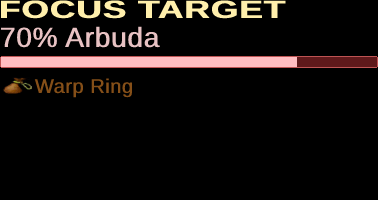
<style>
.page{position:relative;width:378px;height:200px;background:#000000}
.page>*{position:absolute;margin:0}
.t1{font:25.2px "Arimo-Bold";color:#ffefac;font-weight:bold;scale:1.4 1}
.t2{font:28px "Arimo-Regular";color:#e8c2c3;font-weight:bold}
.t3{font:20px "Arimo-Regular";color:#854f18;font-weight:bold}
</style>
<div class="page">
<p class="t1" style="left:0px;top:0px;width:286px;height:19px">FOCUS TARGET</p>
<p class="t2" style="left:1px;top:26px;width:159px;height:22px">70% Arbuda</p>
<p class="t3" style="left:34px;top:78px;width:99px;height:20px">Warp Ring</p>
</div>
